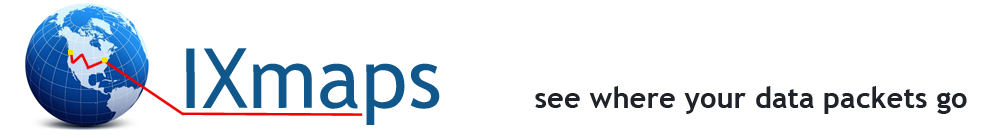
<style>
.page{position:relative;width:1000px;height:138px;background:#ffffff}
.page>*{position:absolute;margin:0}
.t1{font:83.3px "TrebuchetMS";color:#10578b}
.t2{font:29.2px "TrebuchetMS-Bold";color:#1f2329}
</style>
<div class="page">
<p class="t1" style="left:186px;top:48px;width:254px;height:77px">IXmaps</p>
<p class="t2" style="left:535px;top:86px;width:432px;height:28px">see where your data packets go</p>
</div>
